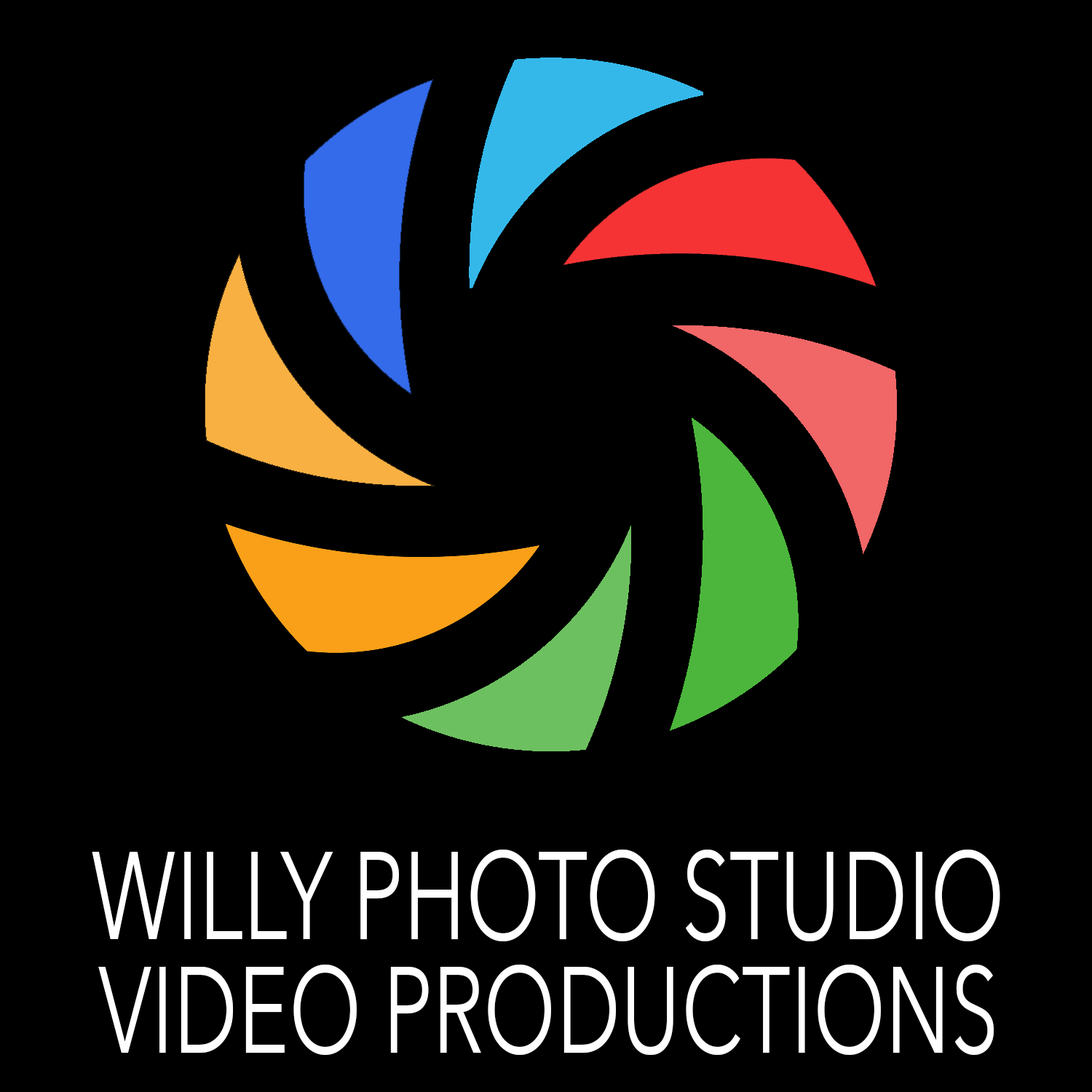
<style>
.page{position:relative;width:1092px;height:1092px;background:#000000}
.page>*{position:absolute;margin:0}
.t1{font:124px "AvenirNext-Regular";color:#ffffff;scale:0.71 1}
.t2{font:120.9px "AvenirNext-Regular";color:#ffffff;scale:0.71 1}
</style>
<div class="page">
<p class="t1" style="left:92px;top:850px;width:908px;height:91px">WILLY PHOTO STUDIO</p>
<p class="t2" style="left:98px;top:965px;width:896px;height:90px">VIDEO PRODUCTIONS</p>
</div>
